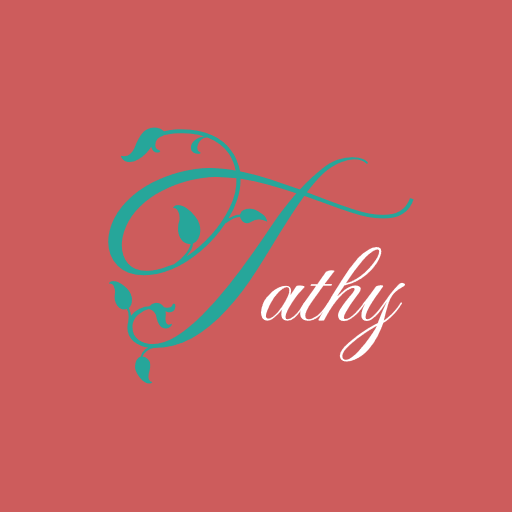
<style>
.page{position:relative;width:512px;height:512px;background:#cd5c5c}
.page>*{position:absolute;margin:0}
.t1{font:106.7px "FleurDeLeah-Regular";color:#ffffff}
.t2{font:256px "FleurDeLeah-Regular";color:#26a69a}
</style>
<div class="page">
<p class="t1" style="left:108px;top:127px;width:306px;height:257px"><span class="t2">T</span>athy</p>
</div>
